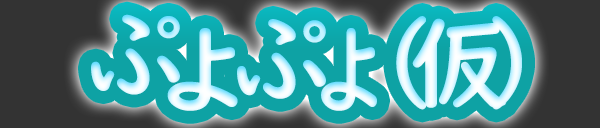
<style>
.page{position:relative;width:600px;height:128px;background:#333333}
.page>*{position:absolute;margin:0}
.t1{font:100px "UDDigiKyokashoN-B";letter-spacing:-0.24em}
.t2{font:100px "UDDigiKyokashoN-B";letter-spacing:-0.3em}
.t3{font:100px "UDDigiKyokashoN-B";letter-spacing:-0.2em}
.t4{font:100px "UDDigiKyokashoN-B";letter-spacing:-0.72em;scale:0.8 1}
</style>
<div class="page">
<p class="t1" style="left:91px;top:14px;width:431px;height:97px"><span class="t2">ぷ</span>よ<span class="t3">ぷ</span><span class="t4">よ</span>（仮）</p>
</div>
